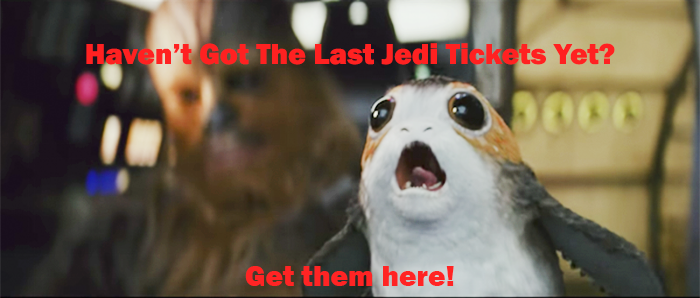
<style>
.page{position:relative;width:700px;height:298px}
.page>*{position:absolute;margin:0}
.t1{font:30px "FranklinGothic-Heavy";color:#ff2121}
.t2{font:30px "FranklinGothic-Heavy";color:#ff2424}
</style>
<div class="page">
<p class="t1" style="left:86px;top:43px;width:529px;height:22px">Haven’t Got The Last Jedi Tickets Yet?</p>
<p class="t2" style="left:245px;top:266px;width:209px;height:20px">Get them here!</p>
</div>
